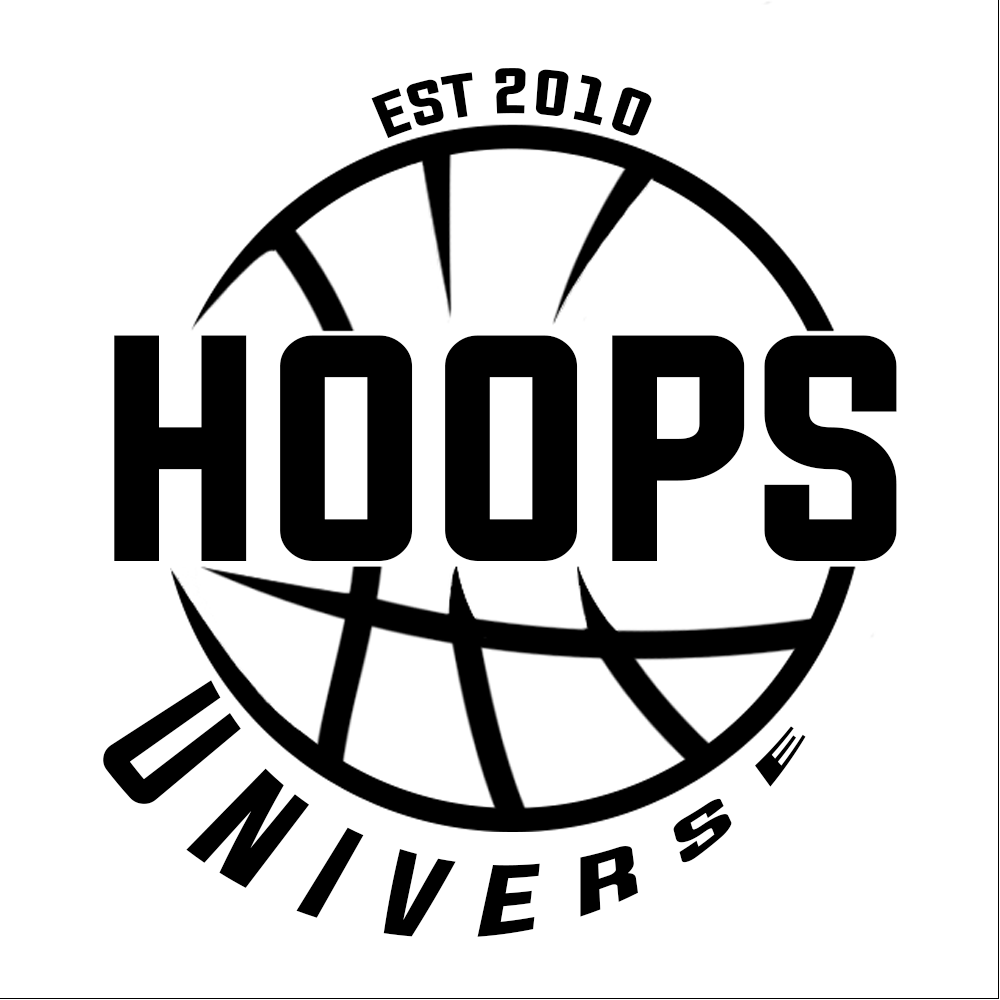
<style>
.page{position:relative;width:1000px;height:1000px;background:#ffffff}
.page>*{position:absolute;margin:0}
.t1{font:54.6px "Evogria";color:#000000}
.t2{font:273.2px "Evogria";color:#000000}
.t3{font:93.7px "Evogria";color:#000000}
</style>
<div class="page">
<p class="t1" style="left:371px;top:68px;width:281px;height:71px">est 2010</p>
<p class="t2" style="left:114px;top:335px;width:783px;height:226px">HOOPS</p>
<p class="t3" style="left:103px;top:680px;width:703px;height:257px">U n i v e r s e</p>
</div>
